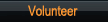
<style>
.page{position:relative;width:108px;height:22px}
.page>*{position:absolute;margin:0}
.t1{font:14px "ArialNarrow";color:#ff9933}
</style>
<div class="page">
<p class="t1" style="left:28px;top:5px;width:50px;height:11px">Volunteer</p>
</div>
